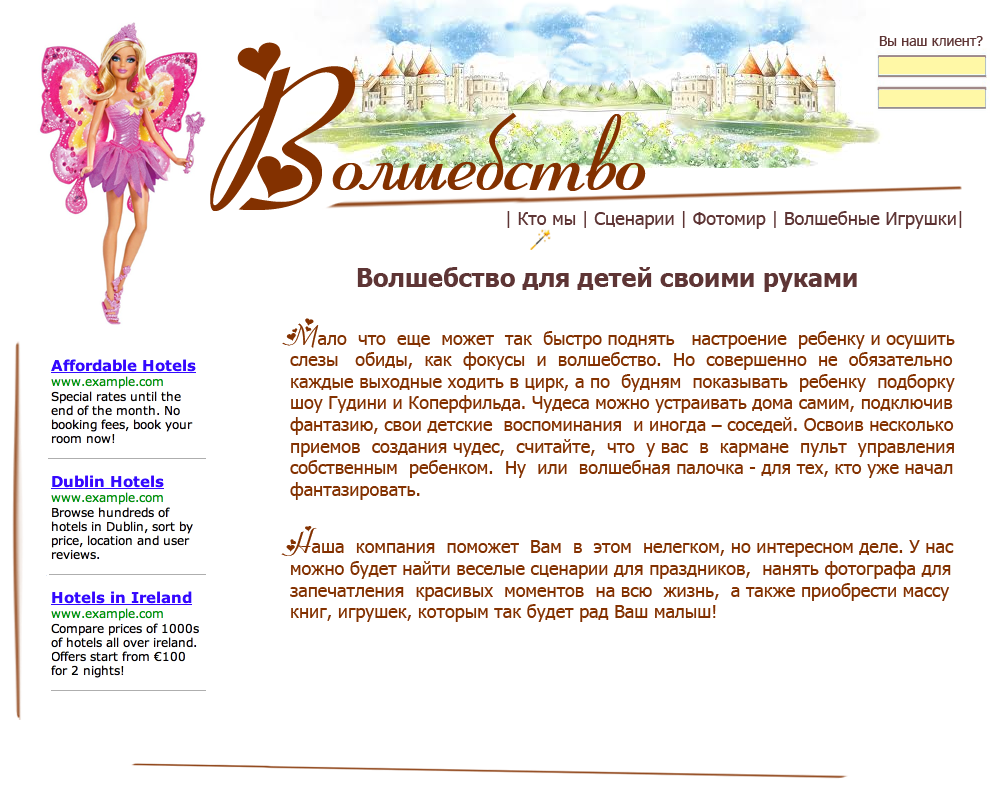
<style>
.page{position:relative;width:1000px;height:800px;background:#ffffff}
.page>*{position:absolute;margin:0}
.t1{font:14px "Tahoma";color:#5e3535}
.t2{font:200px "RibbonHeart";color:#833100}
.t3{font:120px "RibbonHeart";color:#833100}
.t4{font:18px "Tahoma";color:#5e3535}
.t5{font:18px "Tahoma";color:#833100}
.t6{font:25px "Tahoma-Bold";color:#5e3535}
.t7{font:30px "RibbonHeart";color:#833100}
</style>
<div class="page">
<p class="t1" style="left:879px;top:36px;width:104px;height:10px">Вы наш клиент?</p>
<p class="t2" style="left:210px;top:42px;width:145px;height:169px">В</p>
<p class="t3" style="left:332px;top:113px;width:314px;height:78px">олшебство</p>
<p class="t4" style="left:507px;top:211px;width:455px;height:18px">| Кто мы | Сценарии | Фотомир | Волшебные Игрушки|</p>
<p class="t5" style="left:281px;top:267px;width:674px;height:355px"><span class="t6">         Волшебство для детей своими руками<br><br></span><span class="t7">М</span>ало  что  еще  может  так  быстро поднять   настроение  ребенку и осушить <br>слезы   обиды,  как  фокусы  и  волшебство.  Но  совершенно  не  обязательно <br>каждые выходные ходить в цирк, а по  будням  показывать  ребенку  подборку <br>шоу Гудини и Коперфильда. Чудеса можно устраивать дома самим, подключив<br>фантазию, свои детские  воспоминания  и иногда – соседей. Освоив несколько<br>приемов  создания чудес,  считайте,  что  у вас  в  кармане  пульт  управления <br>собственным  ребенком.  Ну  или  волшебная палочка - для тех, кто уже начал<br>фантазировать.<br><br><span class="t7">Н</span>аша  компания  поможет  Вам  в  этом  нелегком, но интересном деле. У нас <br>можно будет найти веселые сценарии для праздников,  нанять фотографа для <br>запечатления  красивых  моментов  на всю  жизнь,  а также приобрести массу<br>книг, игрушек, которым так будет рад Ваш малыш!</p>
</div>
